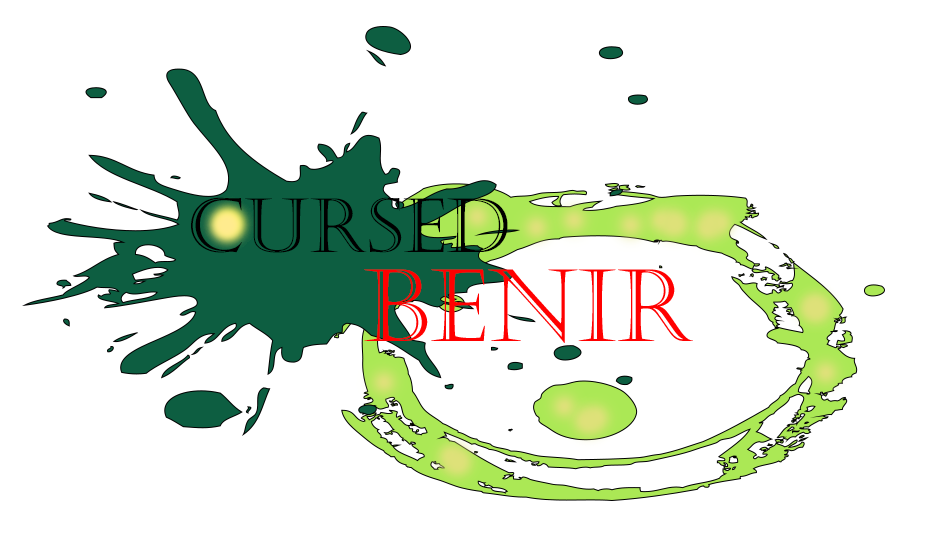
<style>
.page{position:relative;width:935px;height:552px;background:#ffffff}
.page>*{position:absolute;margin:0}
.t1{font:75px "Castellar";color:#000000}
.t2{font:100px "Castellar";color:#ff0000}
.t3{font:100px "Castellar";color:#35312e}
</style>
<div class="page">
<p class="t1" style="left:191px;top:197px;width:317px;height:56px">Cursed</p>
<p class="t2" style="left:364px;top:269px;width:329px;height:74px">beNIr<br><span class="t3"><br>nir</span></p>
</div>
